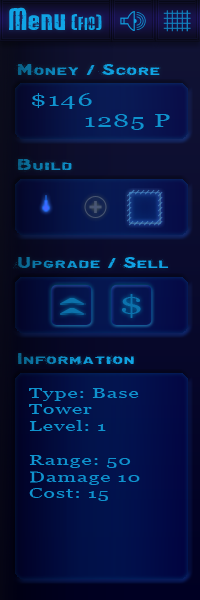
<style>
.page{position:relative;width:200px;height:600px}
.page>*{position:absolute;margin:0}
.t1{font:10px "Rockit";letter-spacing:0.04em;color:#10a4e5;scale:1.52 1}
.t2{font:7px "Rockit";letter-spacing:0.04em;color:#10a4e5;scale:1.52 1}
.t3{font:6px "Rockit";letter-spacing:0.04em;color:#10a4e5;scale:1.52 1}
.t4{font:14px "Graffiare";letter-spacing:0.04em;scale:1.52 1}
.t5{font:18px "Georgia";letter-spacing:0.04em;color:#0f93ce;scale:1.52 1}
.t6{font:26px "Georgia";letter-spacing:0.04em;color:#0c72ad;scale:1.52 1}
.t7{font:14px "Georgia";letter-spacing:0.04em;color:#0f93ce;scale:1.52 1}
</style>
<div class="page">
<p class="t1" style="left:9px;top:7px;width:93px;height:23px;text-align:center">Menu <span class="t2">(</span><span class="t3">FlO</span><span class="t2">)</span></p>
<p class="t4" style="left:14px;top:62px;width:147px;height:14px">Money / Score</p>
<p class="t5" style="left:32px;top:93px;width:138px;height:37px">$146<br>       1285 P</p>
<p class="t4" style="left:16px;top:159px;width:56px;height:13px">Build</p>
<p class="t4" style="left:13px;top:257px;width:156px;height:12px">Upgrade / Sell</p>
<p class="t6" style="left:122px;top:294px;width:19px;height:24px">$</p>
<p class="t4" style="left:18px;top:353px;width:116px;height:12px">Information</p>
<p class="t7" style="left:29px;top:388px;width:111px;height:113px">Type: Base Tower<br>Level: 1<br><br>Range: 50<br>Damage 10<br>Cost: 15</p>
</div>
